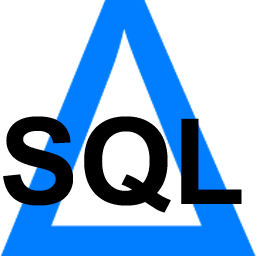
<style>
.page{position:relative;width:256px;height:256px;background:#ffffff}
.page>*{position:absolute;margin:0}
.t1{font:120px "Arial-BoldMT";color:#000000}
</style>
<div class="page">
<p class="t1" style="left:3px;top:116px;width:239px;height:97px">SQL</p>
</div>
